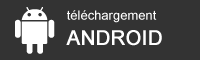
<style>
.page{position:relative;width:200px;height:60px;background:#333333}
.page>*{position:absolute;margin:0}
.t1{font:13px/25px "ArialMT";color:#ffffff}
.t2{font:20px/25px "ArialMT";color:#ffffff;font-weight:bold}
</style>
<div class="page">
<p class="t1" style="left:66px;top:10px;width:96px;height:36px">téléchargement<br><span class="t2">ANDROID</span></p>
</div>
